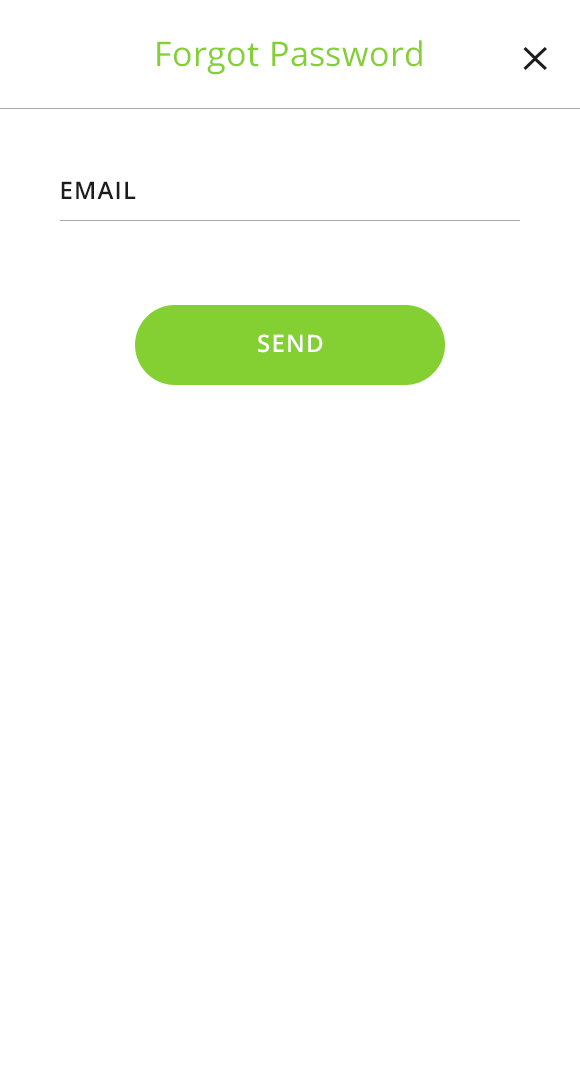
<style>
.page{position:relative;width:580px;height:1084px;background:#ffffff}
.page>*{position:absolute;margin:0}
.t1{font:34px "OpenSans";letter-spacing:0.01em;color:#84d033}
.t2{font:24px "OpenSans-Semibold";letter-spacing:0.05em;color:#1c1c1c;text-transform:uppercase}
.t3{font:24px "OpenSans-Semibold";letter-spacing:0.05em;color:#ffffff;text-transform:uppercase}
</style>
<div class="page">
<p class="t1" style="left:157px;top:40px;width:265px;height:35px">Forgot Password</p>
<p class="t2" style="left:61px;top:181px;width:75px;height:18px">Email</p>
<p class="t3" style="left:258px;top:334px;width:65px;height:19px">send</p>
</div>
